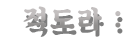
<style>
.page{position:relative;width:124px;height:40px;background:#ffffff}
.page>*{position:absolute;margin:0}
.t1{font:26.9px "SDKukdetopokki-bBd";letter-spacing:0.08em}
</style>
<div class="page">
<p class="t1" style="left:23px;top:6px;width:98px;height:25px">적도라 :</p>
</div>
